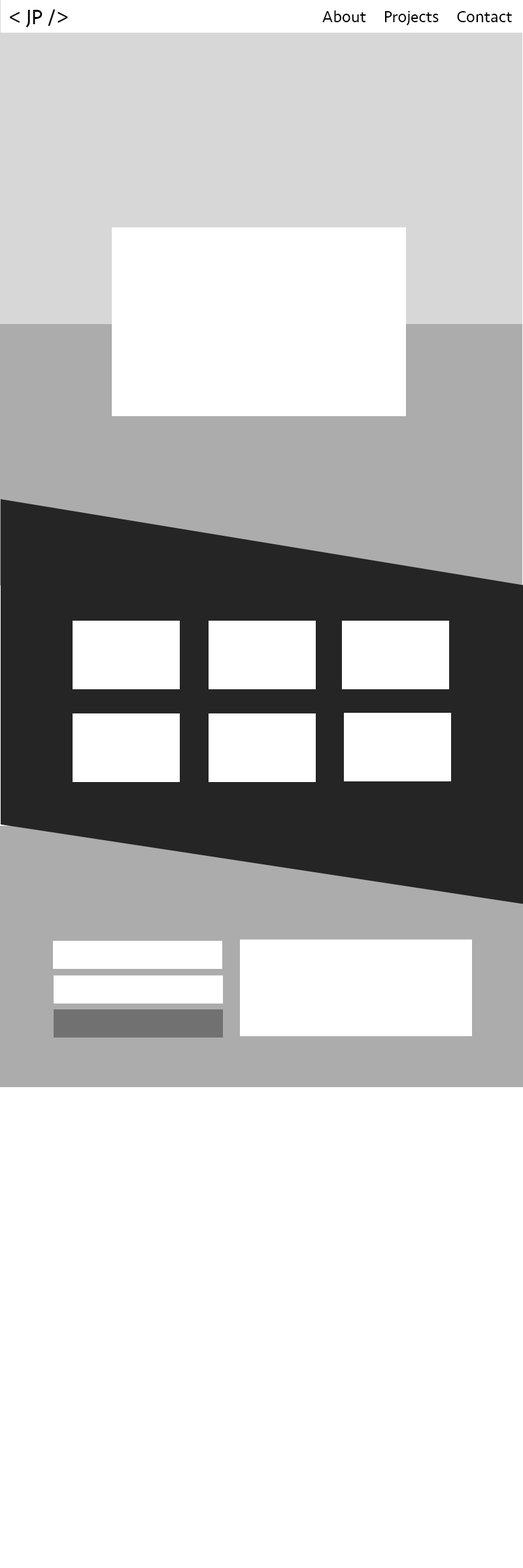
<style>
.page{position:relative;width:523px;height:1568px;background:#ffffff}
.page>*{position:absolute;margin:0}
.t1{font:21.8px "Seravek";color:#000000}
.t2{font:16.3px "Seravek";color:#000000}
</style>
<div class="page">
<p class="t1" style="left:10px;top:9px;width:58px;height:18px">&lt; JP /&gt;</p>
<p class="t2" style="left:322px;top:10px;width:190px;height:15px">About     Projects     Contact</p>
</div>
